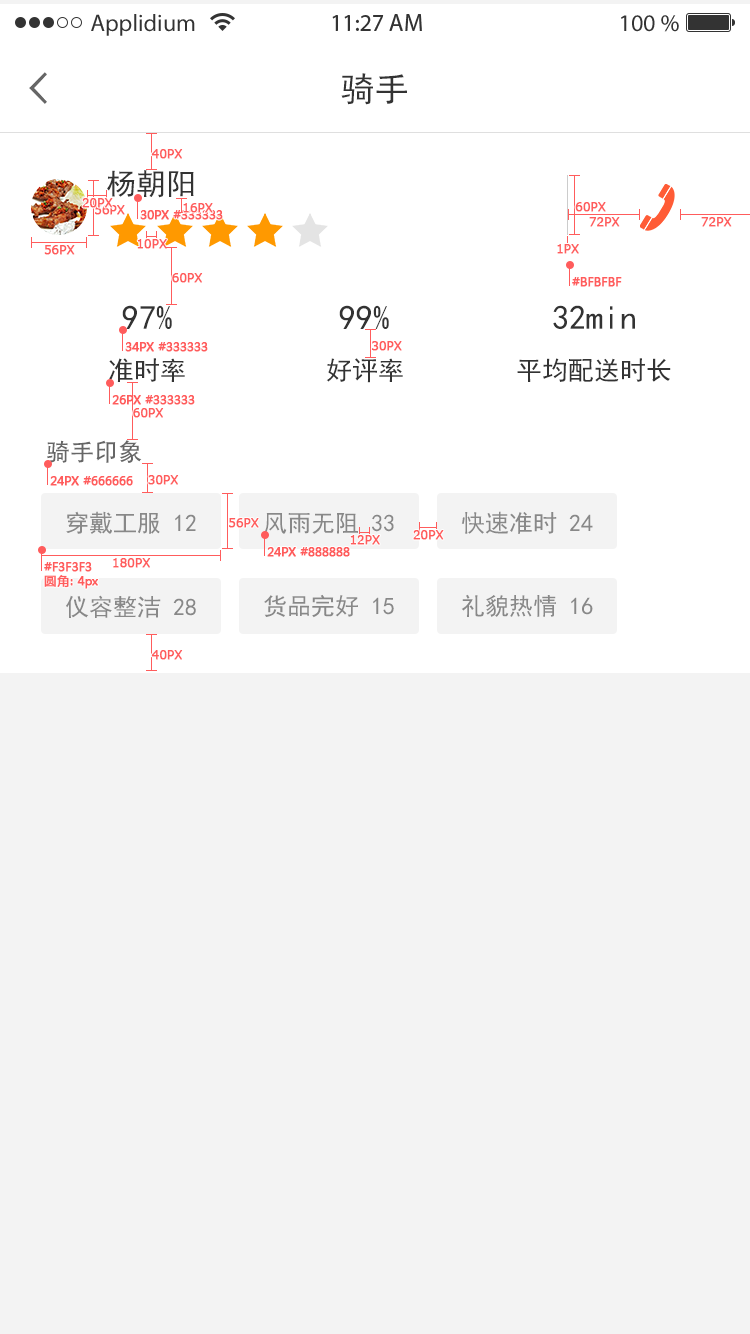
<style>
.page{position:relative;width:750px;height:1334px;background:#f3f3f3}
.page>*{position:absolute;margin:0}
.t1{font:24px "MyriadPro-Regular";color:#333333}
.t2{font:34px "SimHei";color:#333333}
.t3{font:12px "Verdana";color:#ff5c5c;font-weight:bold}
.t4{font:29.9px "SimHei";color:#333333}
.t5{font:12px "MicrosoftYaHei";color:#ff5c5c;font-weight:bold}
.t6{font:26px "SimHei";color:#333333}
.t7{font:24px "AdobeHeitiStd-Regular";color:#666666}
.t8{font:24px "SimHei";color:#888888}
</style>
<div class="page">
<p class="t1" style="left:91px;top:14px;width:104px;height:22px">Applidium</p>
<p class="t1" style="left:332px;top:14px;width:90px;height:17px">11:27 AM</p>
<p class="t1" style="left:621px;top:15px;width:58px;height:17px">100 %</p>
<p class="t2" style="left:341px;top:73px;width:66px;height:32px">骑手</p>
<p class="t3" style="left:151px;top:149px;width:32px;height:10px">40PX</p>
<p class="t4" style="left:107px;top:170px;width:87px;height:28px">杨朝阳</p>
<p class="t3" style="left:82px;top:198px;width:31px;height:10px">20PX</p>
<p class="t3" style="left:95px;top:205px;width:30px;height:10px">56PX</p>
<p class="t3" style="left:183px;top:203px;width:30px;height:10px">16PX</p>
<p class="t3" style="left:575px;top:202px;width:31px;height:10px">60PX</p>
<p class="t5" style="left:140px;top:210px;width:83px;height:10px">30PX #333333</p>
<p class="t3" style="left:589px;top:217px;width:31px;height:10px">72PX</p>
<p class="t3" style="left:701px;top:217px;width:31px;height:10px">72PX</p>
<p class="t3" style="left:44px;top:245px;width:31px;height:10px">56PX</p>
<p class="t3" style="left:137px;top:239px;width:30px;height:10px">10PX</p>
<p class="t3" style="left:557px;top:244px;width:22px;height:10px">1PX</p>
<p class="t3" style="left:172px;top:273px;width:31px;height:10px">60PX</p>
<p class="t5" style="left:572px;top:277px;width:50px;height:10px">#BFBFBF</p>
<p class="t2" style="left:122px;top:305px;width:50px;height:24px">97%</p>
<p class="t2" style="left:339px;top:305px;width:50px;height:24px">99%</p>
<p class="t2" style="left:553px;top:305px;width:82px;height:24px">32min</p>
<p class="t5" style="left:125px;top:342px;width:83px;height:10px">34PX #333333</p>
<p class="t3" style="left:371px;top:341px;width:31px;height:10px">30PX</p>
<p class="t6" style="left:109px;top:358px;width:76px;height:24px">准时率</p>
<p class="t6" style="left:326px;top:358px;width:77px;height:25px">好评率</p>
<p class="t6" style="left:517px;top:358px;width:154px;height:24px">平均配送时长</p>
<p class="t5" style="left:112px;top:395px;width:83px;height:10px">26PX #333333</p>
<p class="t3" style="left:133px;top:408px;width:31px;height:10px">60PX</p>
<p class="t7" style="left:47px;top:440px;width:95px;height:23px">骑手印象</p>
<p class="t5" style="left:50px;top:476px;width:83px;height:10px">24PX #666666</p>
<p class="t3" style="left:148px;top:475px;width:31px;height:10px">30PX</p>
<p class="t8" style="left:66px;top:511px;width:130px;height:23px">穿戴工服 12</p>
<p class="t3" style="left:229px;top:518px;width:30px;height:10px">56PX</p>
<p class="t8" style="left:264px;top:513px;width:130px;height:21px">风雨无阻 33</p>
<p class="t8" style="left:461px;top:511px;width:132px;height:23px">快速准时 24</p>
<p class="t3" style="left:413px;top:530px;width:31px;height:10px">20PX</p>
<p class="t3" style="left:350px;top:535px;width:30px;height:10px">12PX</p>
<p class="t3" style="left:113px;top:558px;width:38px;height:10px">180PX</p>
<p class="t5" style="left:267px;top:547px;width:83px;height:10px">24PX #888888</p>
<p class="t5" style="left:44px;top:562px;width:54px;height:27px">#F3F3F3<br>圆角: 4px</p>
<p class="t8" style="left:66px;top:595px;width:130px;height:23px">仪容整洁 28</p>
<p class="t8" style="left:264px;top:594px;width:130px;height:24px">货品完好 15</p>
<p class="t8" style="left:461px;top:594px;width:132px;height:23px">礼貌热情 16</p>
<p class="t3" style="left:151px;top:650px;width:32px;height:10px">40PX</p>
</div>
